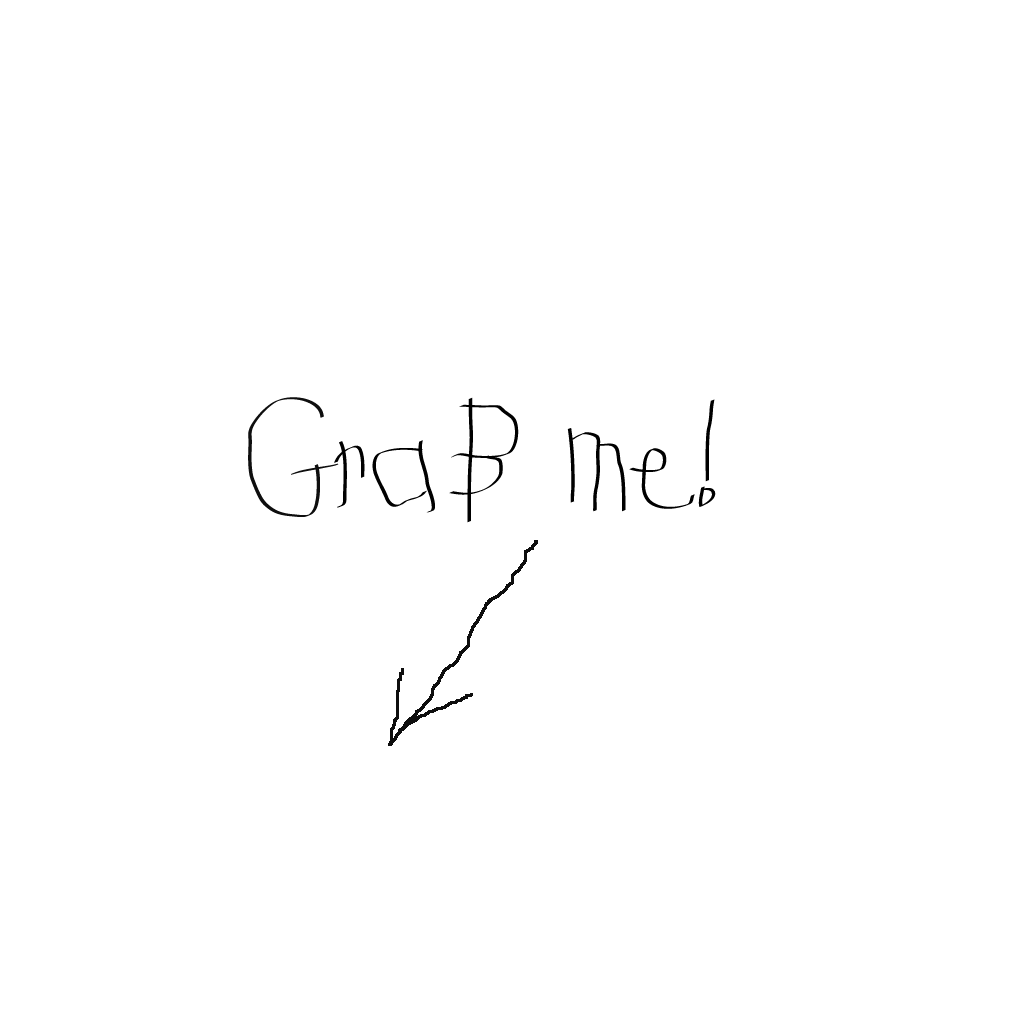
<style>
.page{position:relative;width:1024px;height:1024px;background:#ffffff}
.page>*{position:absolute;margin:0}
.t1{font:144px "KidsFirstPrintFont";color:#000000}
.t2{font:144px "KidsFirstPrintFont";color:#0e0e0e}
</style>
<div class="page">
<p class="t1" style="left:248px;top:397px;width:468px;height:126px"><span class="t2">G</span>raB me!</p>
</div>
